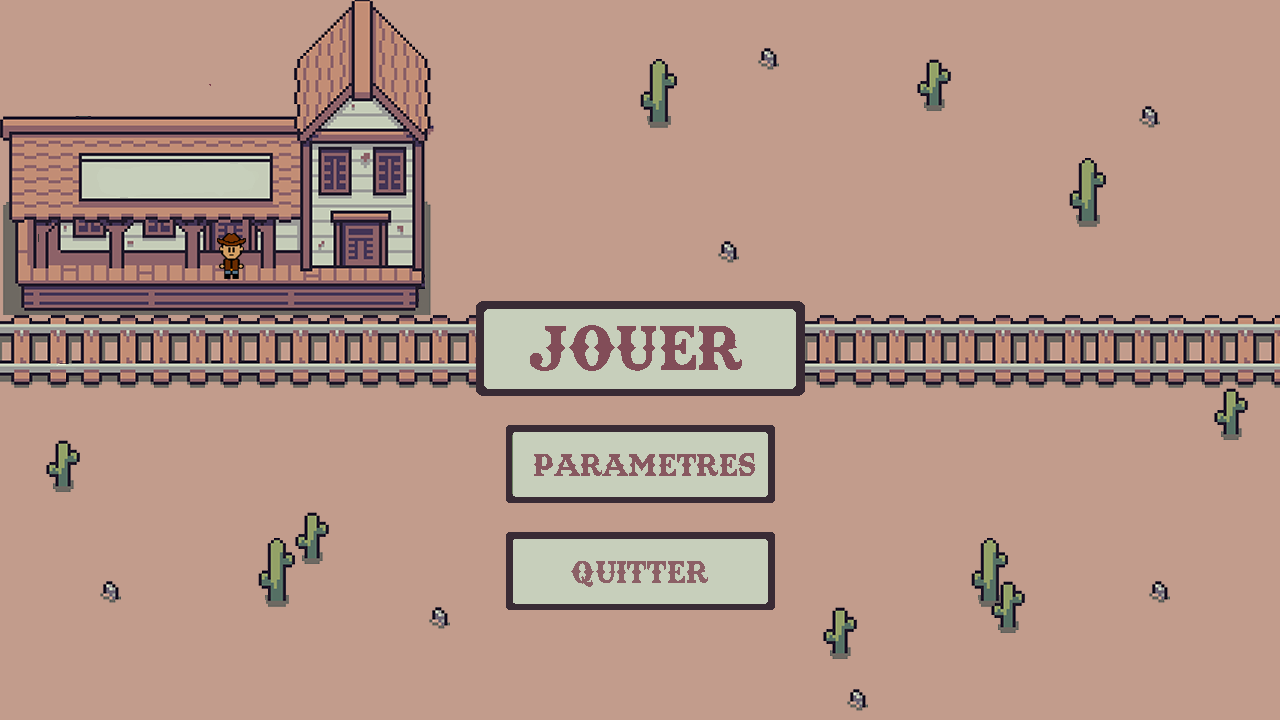
<style>
.page{position:relative;width:1280px;height:720px;background:#c29c8c}
.page>*{position:absolute;margin:0}
.t1{font:60px "TexasTangoBOLDPERSONALUSE";color:#824d58}
.t2{font:30px "TexasTangoBOLDPERSONALUSE";color:#885860}
.t3{font:30px "TexasTangoBOLDPERSONALUSE";color:#8c6066}
</style>
<div class="page">
<p class="t1" style="left:530px;top:325px;width:212px;height:46px">Jouer</p>
<p class="t2" style="left:534px;top:453px;width:221px;height:23px">Parametres</p>
<p class="t3" style="left:571px;top:561px;width:137px;height:26px">Quitter</p>
</div>
